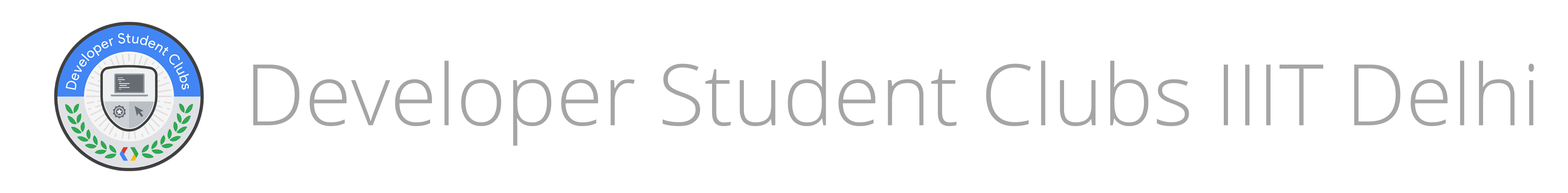
<style>
.page{position:relative;width:1568px;height:193px;background:#ffffff}
.page>*{position:absolute;margin:0}
.t1{font:84.9px "OpenSans-Light";color:#a5a5a5}
</style>
<div class="page">
<p class="t1" style="left:253px;top:61px;width:1281px;height:85px">Developer Student Clubs IIIT Delhi</p>
</div>
